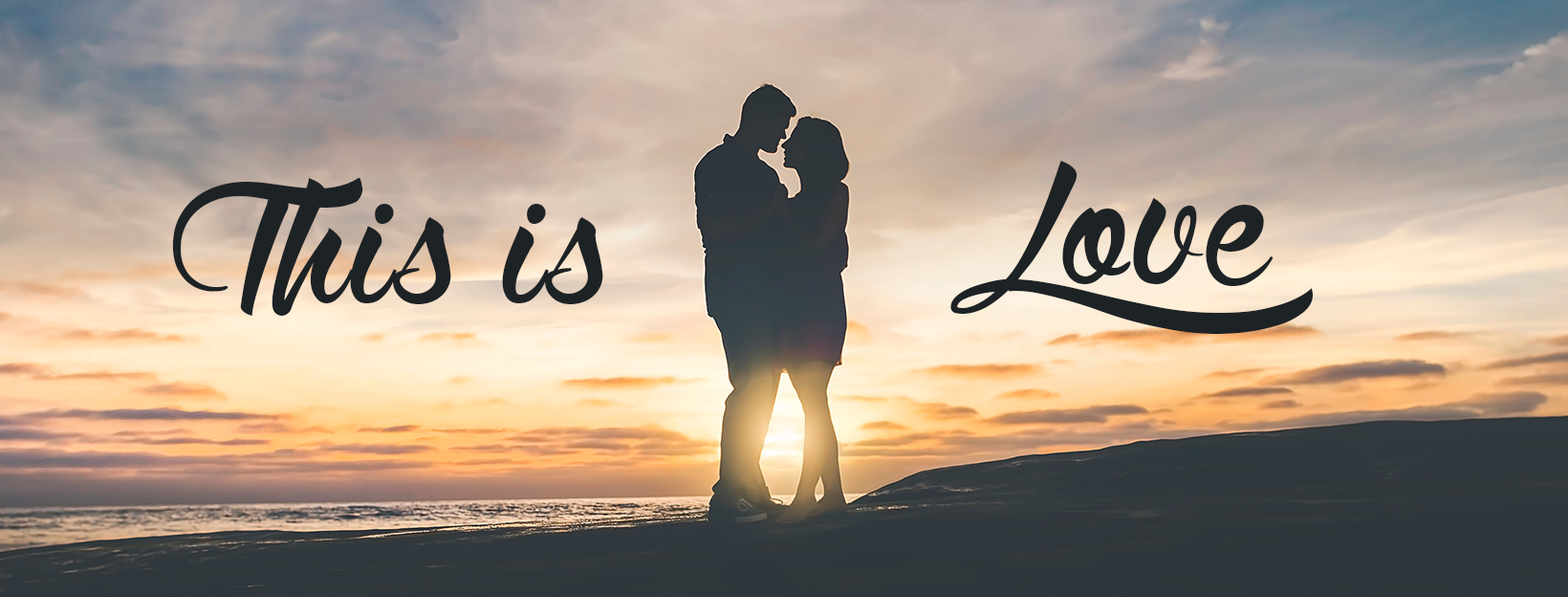
<style>
.page{position:relative;width:1568px;height:597px}
.page>*{position:absolute;margin:0}
.t1{font:286.8px "WolfintheCity";letter-spacing:0.03em;color:#1d2225}
</style>
<div class="page">
<p class="t1" style="left:950px;top:161px;width:363px;height:173px">Love</p>
<p class="t1" style="left:172px;top:178px;width:431px;height:138px">This is</p>
</div>
